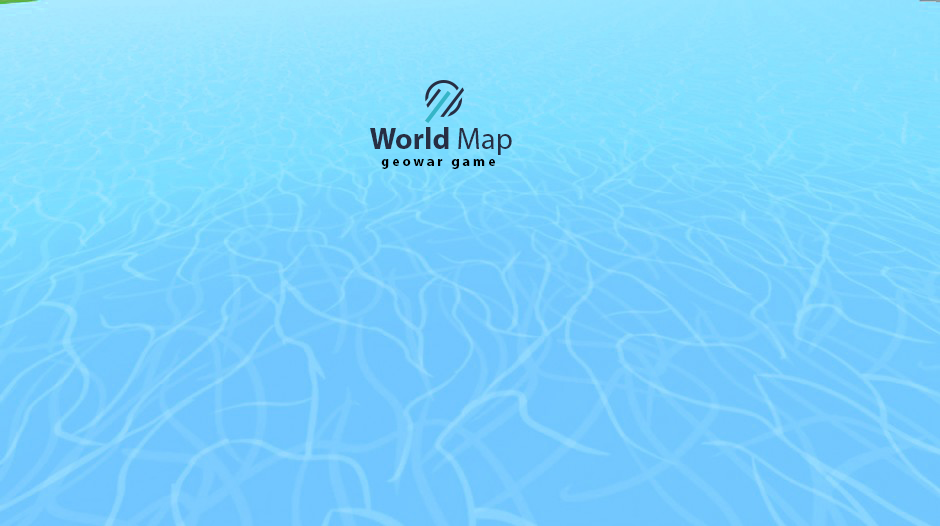
<style>
.page{position:relative;width:940px;height:526px}
.page>*{position:absolute;margin:0}
.t1{font:30px "MyriadPro-Bold";color:#272e43}
.t2{font:30px "MyriadPro-Regular";color:#272e43}
.t3{font:14px "MyriadPro-Bold";letter-spacing:0.2em;color:#000000}
</style>
<div class="page">
<p class="t1" style="left:370px;top:127px;width:142px;height:28px">World <span class="t2">Map</span></p>
<p class="t3" style="left:381px;top:159px;width:114px;height:10px">geowar game</p>
</div>
